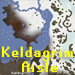
<style>
.page{position:relative;width:75px;height:75px}
.page>*{position:absolute;margin:0}
.t1{font:16.4px "RuneScape-UF";letter-spacing:0.1em;color:#ffff00}
.t2{font:16.7px "RuneScape-UF";letter-spacing:0.1em;color:#ffff00}
</style>
<div class="page">
<p class="t1" style="left:1px;top:46px;width:72px;height:16px">Keldagrim</p>
<p class="t2" style="left:22px;top:61px;width:36px;height:12px">Aisle</p>
</div>
